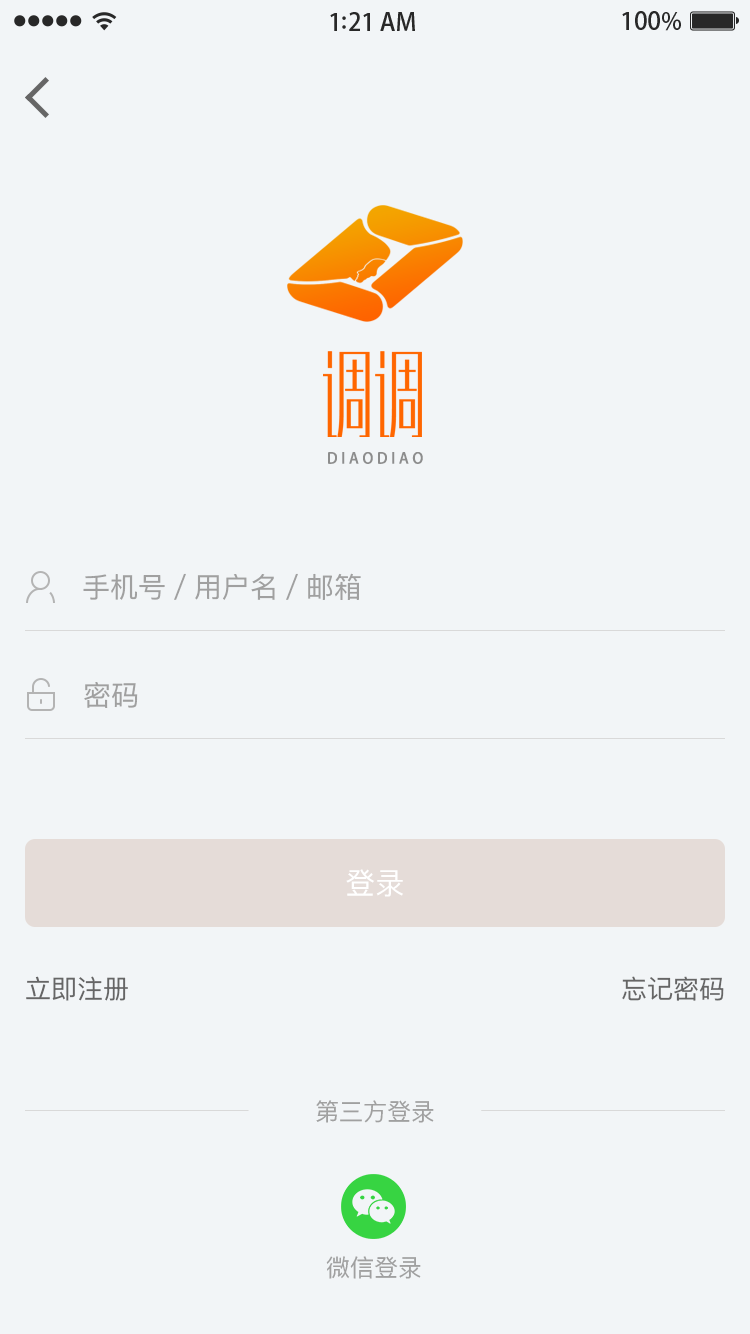
<style>
.page{position:relative;width:750px;height:1334px;background:#f2f5f7}
.page>*{position:absolute;margin:0}
.t1{font:87.4px "MFXingHei_Noncommercial-Light";color:#fd7103;text-transform:uppercase}
.t2{font:15px "AdobeHeitiStd-Regular";letter-spacing:0.242em;color:#8d8d8d;text-transform:uppercase}
.t3{font:28px "PingFangSC-Regular";color:#a0a0a0}
.t4{font:30px "PingFangSC-Regular";color:#ffffff;text-transform:uppercase}
.t5{font:26px "PingFangSC-Regular";color:#666666}
.t6{font:24px "PingFangSC-Regular";color:#a0a0a0}
</style>
<div class="page">
<p class="t1" style="left:323px;top:351px;width:99px;height:86px">调调</p>
<p class="t2" style="left:328px;top:452px;width:95px;height:12px">diaodiao</p>
<p class="t3" style="left:83px;top:573px;width:278px;height:27px">手机号／用户名／邮箱</p>
<p class="t3" style="left:84px;top:682px;width:54px;height:26px">密码</p>
<p class="t4" style="left:346px;top:869px;width:57px;height:28px">登录</p>
<p class="t5" style="left:26px;top:976px;width:102px;height:25px">立即注册</p>
<p class="t5" style="left:622px;top:976px;width:102px;height:25px">忘记密码</p>
<p class="t6" style="left:316px;top:1100px;width:118px;height:23px">第三方登录</p>
<p class="t6" style="left:326px;top:1256px;width:95px;height:23px">微信登录</p>
</div>
